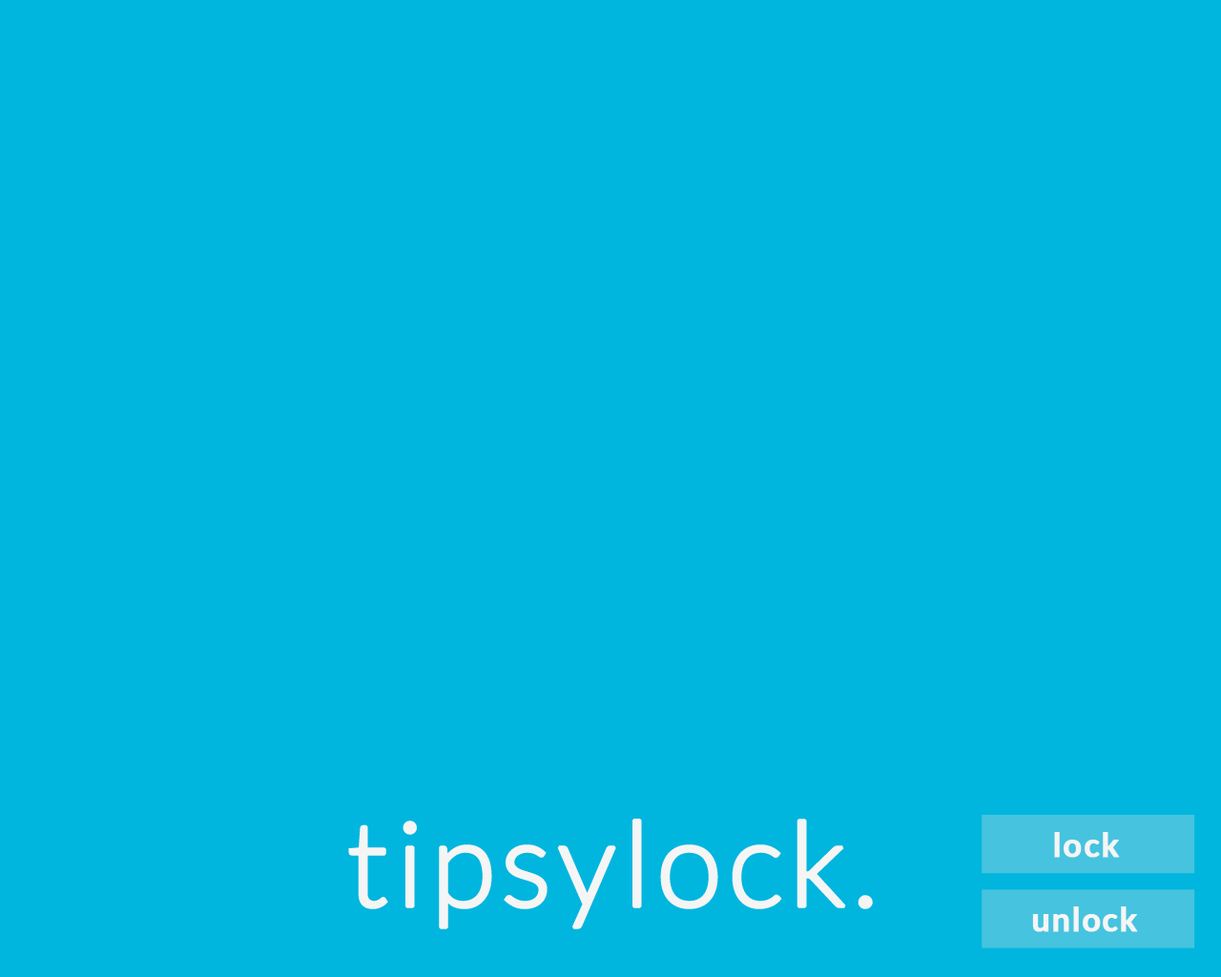
<style>
.page{position:relative;width:1221px;height:977px;background:#00b6de}
.page>*{position:absolute;margin:0}
.t1{font:118.3px "Lato-Light";letter-spacing:0.03em;color:#f5f5f5;font-weight:bold}
.t2{font:32.2px "Lato-Bold";letter-spacing:0.03em;color:#f5f5f5;font-weight:bold}
</style>
<div class="page">
<p class="t1" style="left:348px;top:818px;width:525px;height:111px">tipsylock.</p>
<p class="t2" style="left:1054px;top:832px;width:66px;height:25px">lock</p>
<p class="t2" style="left:1032px;top:906px;width:106px;height:26px">unlock</p>
</div>
